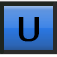
<style>
.page{position:relative;width:57px;height:57px}
.page>*{position:absolute;margin:0}
.t1{font:48px "SakkalMajalla";letter-spacing:-0.025em;color:#000000;font-variant:small-caps;font-weight:bold}
</style>
<div class="page">
<p class="t1" style="left:18px;top:17px;width:21px;height:25px">U</p>
</div>
